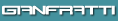
<style>
.page{position:relative;width:118px;height:21px;background:#44919d}
.page>*{position:absolute;margin:0}
.t1{font:13px "N-Gage";color:#feffff}
</style>
<div class="page">
<p class="t1" style="left:2px;top:5px;width:113px;height:10px">Gianfratti</p>
</div>
